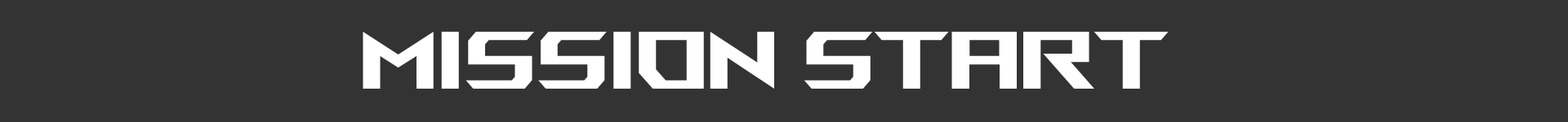
<style>
.page{position:relative;width:1568px;height:122px;background:#333333}
.page>*{position:absolute;margin:0}
.t1{font:81.7px "ROGFonts-Regular";color:#ffffff}
</style>
<div class="page">
<p class="t1" style="left:363px;top:32px;width:806px;height:57px">mission start</p>
</div>
